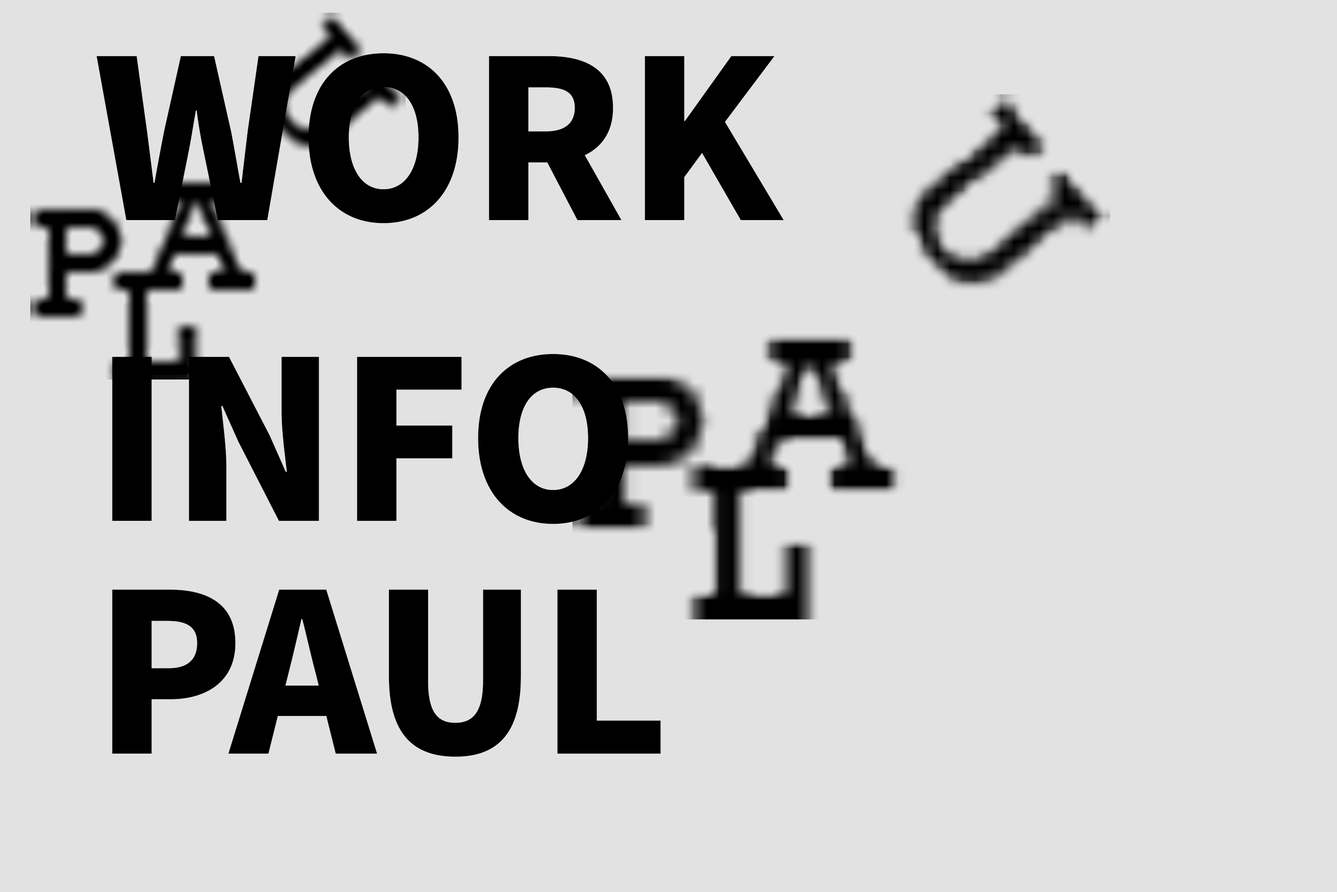
<style>
.page{position:relative;width:1337px;height:892px;background:#e2e2e2}
.page>*{position:absolute;margin:0}
.t1{font:220px "SourceHanSansSCVF-Heavy";color:#000000}
</style>
<div class="page">
<p class="t1" style="left:96px;top:53px;width:688px;height:170px">WORK</p>
<p class="t1" style="left:112px;top:353px;width:517px;height:171px">INFO</p>
<p class="t1" style="left:112px;top:589px;width:549px;height:168px">PAUL</p>
</div>
